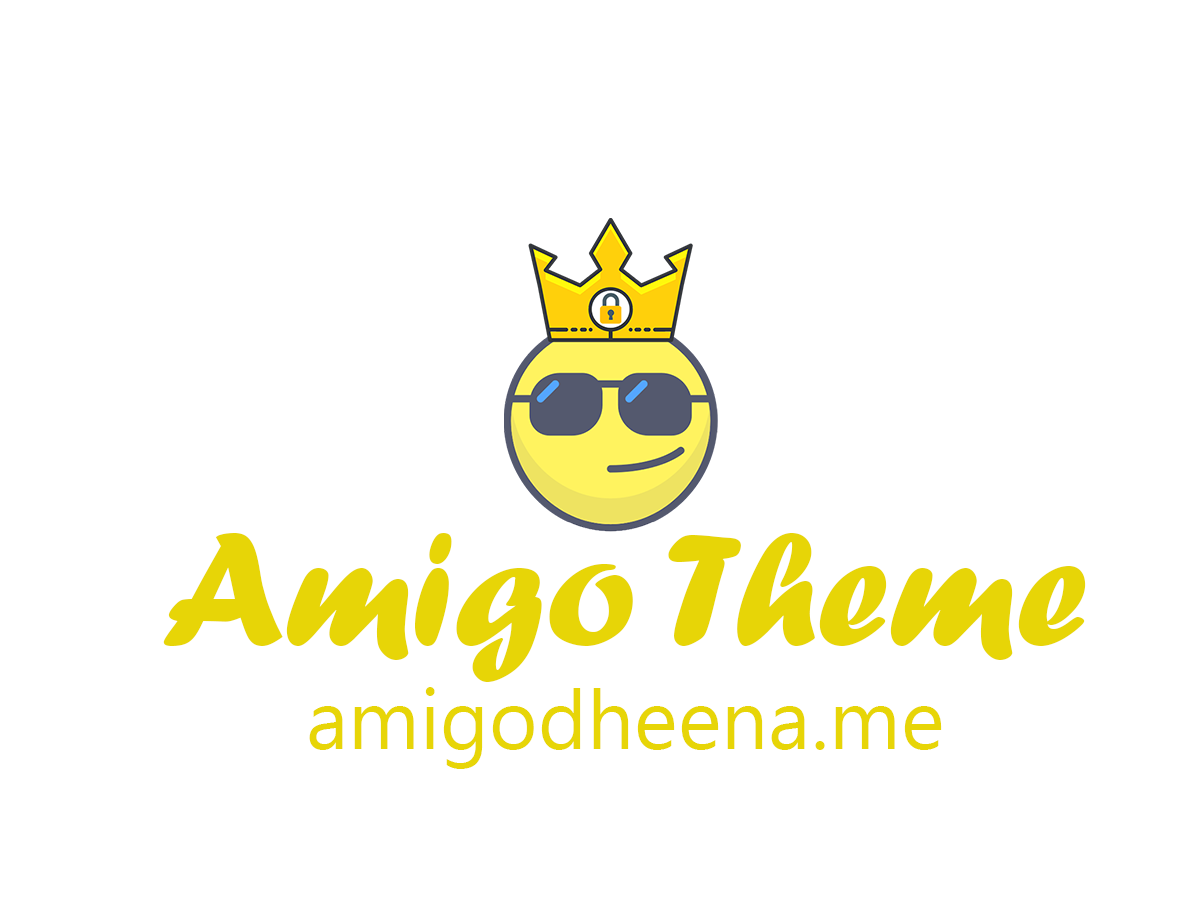
<style>
.page{position:relative;width:1200px;height:900px;background:#ffffff}
.page>*{position:absolute;margin:0}
.t1{font:166.7px "ForteMT";color:#e7d507}
.t2{font:83.3px "Ebrima";color:#e7d507}
</style>
<div class="page">
<p class="t1" style="left:163px;top:533px;width:923px;height:149px">Amigo Theme</p>
<p class="t2" style="left:309px;top:687px;width:633px;height:82px">amigodheena.me</p>
</div>
